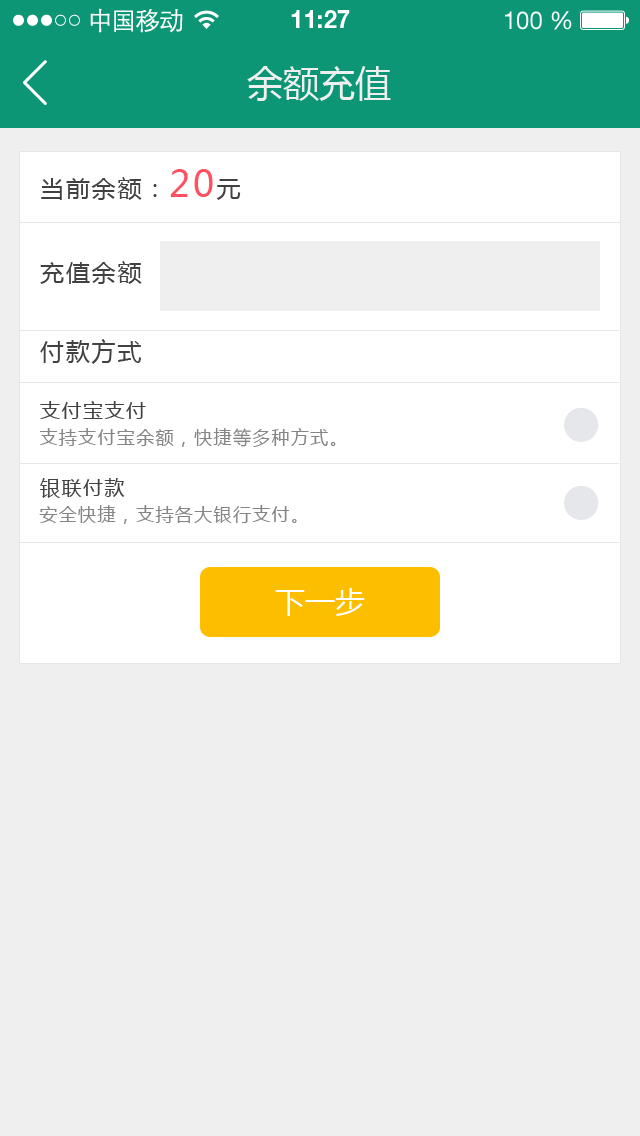
<style>
.page{position:relative;width:640px;height:1136px;background:#efefef}
.page>*{position:absolute;margin:0}
.t1{font:25px "STXihei";letter-spacing:-0.045em;color:#fefefe}
.t2{font:24.6px "HelveticaNeueLTPro-Bd";color:#ffffff}
.t3{font:24.6px "HelveticaNeueLTStd-Roman";color:#ffffff}
.t4{font:36px "MicrosoftYaHei";color:#efefef}
.t5{font:24px "MicrosoftYaHei";letter-spacing:0.075em;color:#414141}
.t6{font:36px "MicrosoftYaHei";letter-spacing:0.075em;color:#ff4f61}
.t7{font:20px "MicrosoftYaHei";letter-spacing:0.075em;color:#414141}
.t8{font:18px "MicrosoftYaHei";letter-spacing:0.075em;color:#858585}
.t9{font:30px "MicrosoftYaHei";color:#ffffff}
</style>
<div class="page">
<p class="t1" style="left:90px;top:8px;width:93px;height:25px">中国移动</p>
<p class="t2" style="left:291px;top:10px;width:59px;height:18px">11:27</p>
<p class="t3" style="left:505px;top:11px;width:67px;height:19px">100 %</p>
<p class="t4" style="left:247px;top:66px;width:144px;height:35px">余额充值</p>
<p class="t5" style="left:41px;top:169px;width:200px;height:31px">当前余额：<span class="t6">20</span>元</p>
<p class="t5" style="left:40px;top:261px;width:102px;height:23px">充值余额</p>
<p class="t5" style="left:40px;top:339px;width:102px;height:25px">付款方式</p>
<p class="t7" style="left:40px;top:401px;width:106px;height:18px">支付宝支付</p>
<p class="t8" style="left:39px;top:428px;width:297px;height:19px">支持支付宝余额，快捷等多种方式。</p>
<p class="t7" style="left:40px;top:478px;width:85px;height:20px">银联付款</p>
<p class="t8" style="left:39px;top:505px;width:258px;height:19px">安全快捷，支持各大银行支付。</p>
<p class="t9" style="left:275px;top:588px;width:90px;height:28px">下一步</p>
</div>
